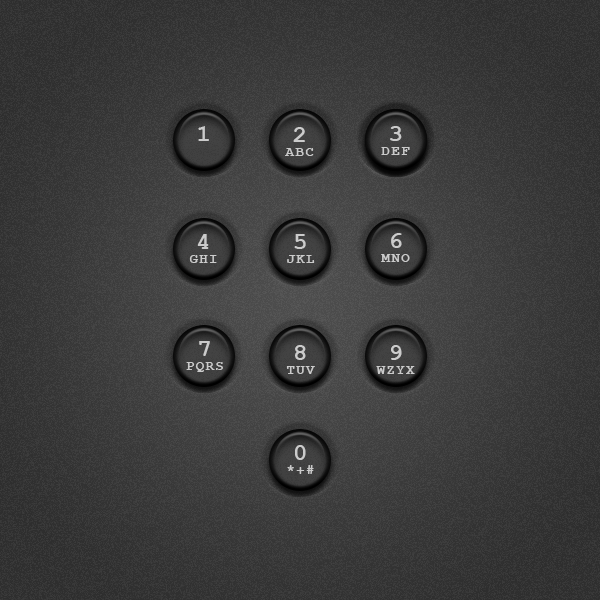
<style>
.page{position:relative;width:600px;height:600px}
.page>*{position:absolute;margin:0}
.t1{font:24px "CourierNewPS-BoldMT";color:#cbcbcb}
.t2{font:14px/14px "CourierNewPS-BoldMT";letter-spacing:0.1em;color:#cbcbcb}
.t3{font:24px/14px "CourierNewPS-BoldMT";color:#cbcbcb}
.t4{font:24px/12px "CourierNewPS-BoldMT";color:#cbcbcb}
</style>
<div class="page">
<p class="t1" style="left:198px;top:126px;width:11px;height:15px">1</p>
<p class="t2" style="left:381px;top:126px;width:29px;height:29px;text-align:center"><span class="t3">3<br></span>DEF</p>
<p class="t2" style="left:285px;top:127px;width:29px;height:29px;text-align:center"><span class="t3">2<br></span>ABC</p>
<p class="t2" style="left:381px;top:233px;width:29px;height:29px;text-align:center"><span class="t4">6<br></span>MNO</p>
<p class="t2" style="left:189px;top:234px;width:28px;height:29px;text-align:center"><span class="t4">4<br></span>GHI</p>
<p class="t2" style="left:287px;top:234px;width:28px;height:29px;text-align:center"><span class="t4">5<br></span>JKL</p>
<p class="t2" style="left:186px;top:341px;width:37px;height:31px;text-align:center"><span class="t4">7<br></span>PQRS</p>
<p class="t2" style="left:286px;top:345px;width:29px;height:29px;text-align:center"><span class="t4">8<br></span>TUV</p>
<p class="t2" style="left:376px;top:345px;width:39px;height:29px;text-align:center"><span class="t4">9<br></span>WZYX</p>
<p class="t2" style="left:287px;top:445px;width:27px;height:29px;text-align:center"><span class="t4">0<br></span>*+#</p>
</div>
